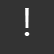
<style>
.page{position:relative;width:54px;height:54px;background:#333333}
.page>*{position:absolute;margin:0}
.t1{font:36px "MicrosoftYaHei";color:#ffffff}
</style>
<div class="page">
<p class="t1" style="left:24px;top:8px;width:6px;height:28px">！</p>
</div>
